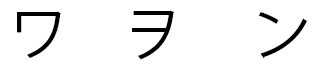
<style>
.page{position:relative;width:320px;height:64px;background:#ffffff}
.page>*{position:absolute;margin:0}
.t1{font:60px "KozGoPr6N-Regular";color:#000000}
</style>
<div class="page">
<p class="t1" style="left:17px;top:10px;width:290px;height:50px">ワ　ヲ 　ン</p>
</div>
